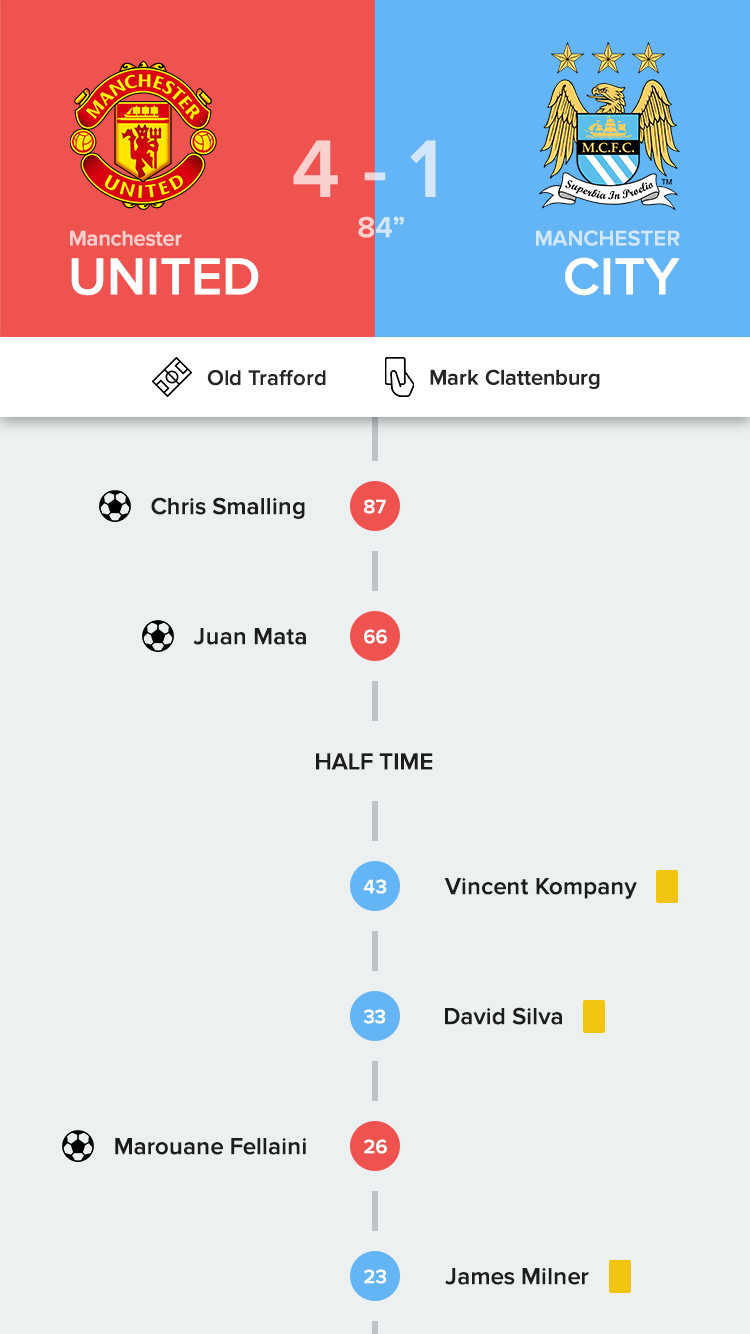
<style>
.page{position:relative;width:750px;height:1334px;background:#ecf0f1}
.page>*{position:absolute;margin:0}
.t1{font:84px "ProximaNova-Semibold"}
.t2{font:30px "ProximaNova-Semibold"}
.t3{font:22px "ProximaNova-Semibold";color:#facfce}
.t4{font:22px "ProximaNova-Semibold";color:#d2e7fc}
.t5{font:54px "ProximaNova-Semibold";color:#ffffff}
.t6{font:22px "ProximaNova-Semibold";color:#262626}
.t7{font:24px "ProximaNova-Semibold";letter-spacing:0.005em;color:#1d1d1d}
.t8{font:20px "ProximaNova-Semibold";letter-spacing:0.005em;color:#ffffff}
</style>
<div class="page">
<p class="t1" style="left:293px;top:140px;width:143px;height:57px">4 - 1</p>
<p class="t2" style="left:358px;top:216px;width:46px;height:22px">84”</p>
<p class="t3" style="left:70px;top:230px;width:112px;height:16px">Manchester</p>
<p class="t4" style="left:536px;top:230px;width:144px;height:16px">MANCHESTER</p>
<p class="t5" style="left:565px;top:257px;width:115px;height:39px">CITY</p>
<p class="t5" style="left:71px;top:258px;width:188px;height:38px">UNITED</p>
<p class="t6" style="left:207px;top:370px;width:119px;height:16px">Old Trafford</p>
<p class="t6" style="left:430px;top:369px;width:170px;height:20px">Mark Clattenburg</p>
<p class="t7" style="left:151px;top:497px;width:154px;height:22px">Chris Smalling</p>
<p class="t8" style="left:364px;top:499px;width:22px;height:15px">87</p>
<p class="t7" style="left:193px;top:628px;width:113px;height:17px">Juan Mata</p>
<p class="t8" style="left:364px;top:629px;width:23px;height:15px">66</p>
<p class="t7" style="left:316px;top:753px;width:117px;height:17px">HALF TIME</p>
<p class="t8" style="left:363px;top:879px;width:24px;height:15px">43</p>
<p class="t7" style="left:444px;top:877px;width:193px;height:22px">Vincent Kompany</p>
<p class="t8" style="left:363px;top:1009px;width:23px;height:15px">33</p>
<p class="t7" style="left:445px;top:1007px;width:117px;height:18px">David Silva</p>
<p class="t7" style="left:115px;top:1137px;width:191px;height:18px">Marouane Fellaini</p>
<p class="t8" style="left:364px;top:1139px;width:23px;height:15px">26</p>
<p class="t8" style="left:364px;top:1269px;width:23px;height:15px">23</p>
<p class="t7" style="left:445px;top:1267px;width:144px;height:18px">James Milner</p>
</div>
